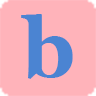
<style>
.page{position:relative;width:96px;height:96px;background:#ffb3ba}
.page>*{position:absolute;margin:0}
.t1{font:83.1px "Georgia-Bold";color:#4b84d2}
</style>
<div class="page">
<p class="t1" style="left:21px;top:14px;width:52px;height:65px">b</p>
</div>
